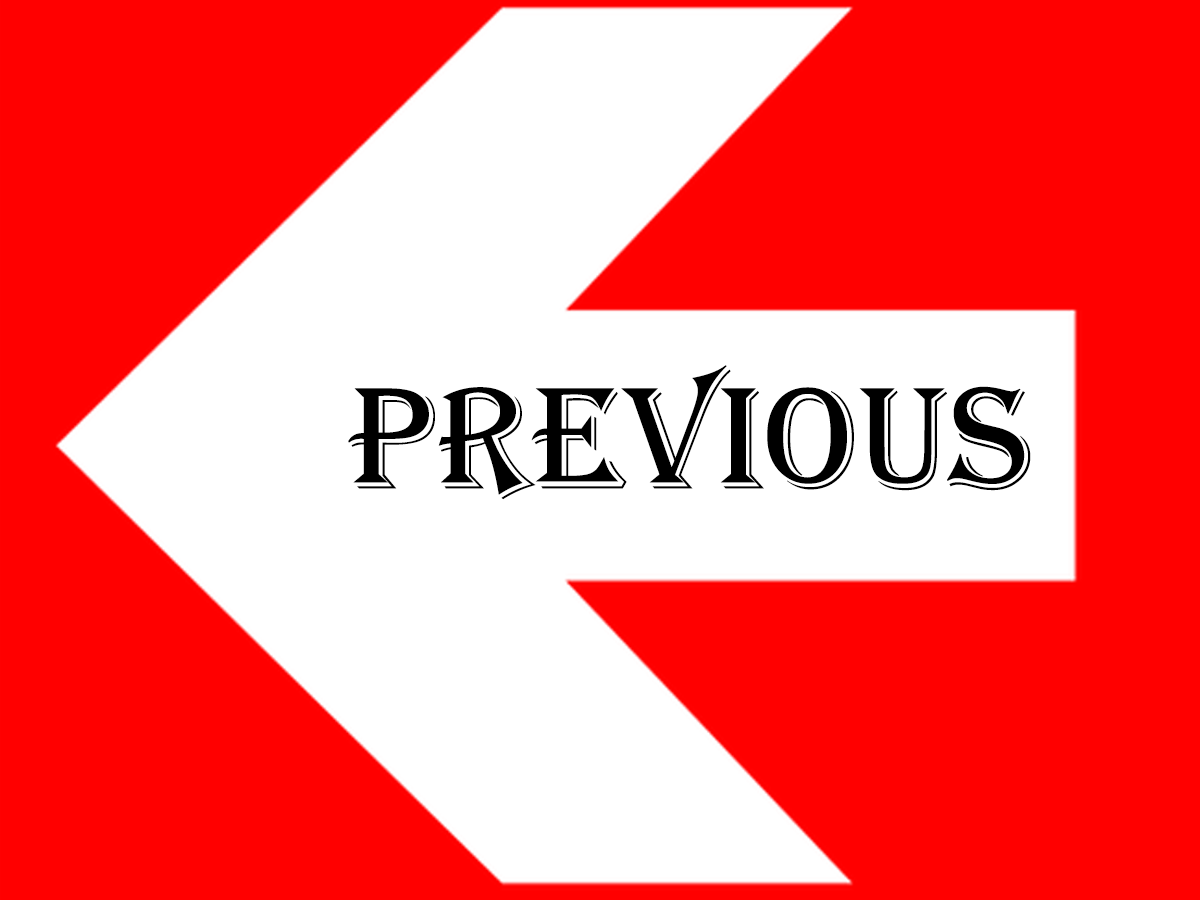
<style>
.page{position:relative;width:1200px;height:900px;background:#ff0000}
.page>*{position:absolute;margin:0}
.t1{font:150px "Algerian";color:#000000}
</style>
<div class="page">
<p class="t1" style="left:348px;top:365px;width:683px;height:135px">Previous</p>
</div>
